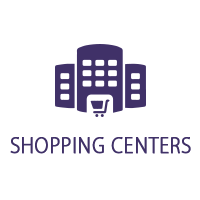
<style>
.page{position:relative;width:200px;height:200px;background:#ffffff}
.page>*{position:absolute;margin:0}
.t1{font:23.9px "MyriadPro-Light";letter-spacing:0.025em;color:#403168;text-transform:uppercase;font-weight:bold;scale:0.83 1}
</style>
<div class="page">
<p class="t1" style="left:10px;top:137px;width:181px;height:17px">Shopping centers</p>
</div>
